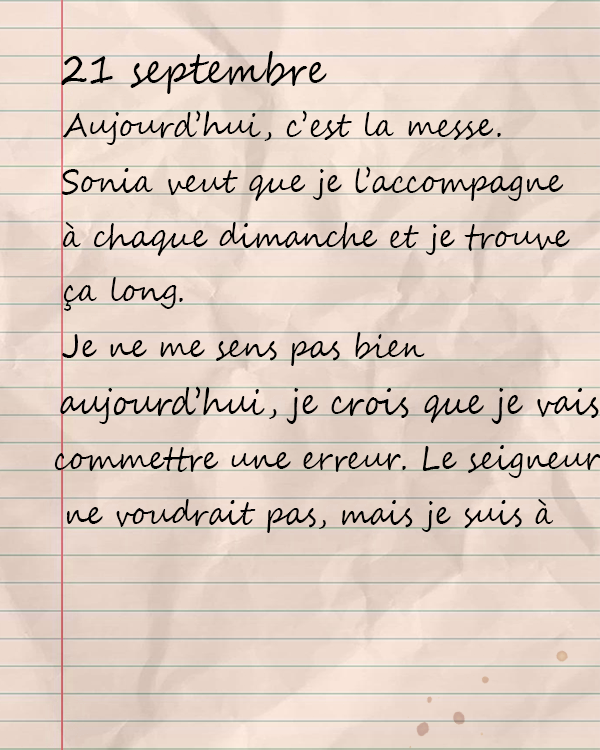
<style>
.page{position:relative;width:600px;height:750px}
.page>*{position:absolute;margin:0}
.t1{font:41.8px "SegoeScript";color:#000000;scale:0.9 1}
.t2{font:33.3px "SegoeScript";color:#000000;scale:0.9 1}
</style>
<div class="page">
<p class="t1" style="left:61px;top:51px;width:266px;height:43px">21 septembre</p>
<p class="t2" style="left:62px;top:110px;width:439px;height:35px">Aujourd’hui, c’est la messe.</p>
<p class="t2" style="left:62px;top:166px;width:502px;height:35px">Sonia veut que je l’accompagne</p>
<p class="t2" style="left:63px;top:222px;width:507px;height:34px">à chaque dimanche et je trouve</p>
<p class="t2" style="left:63px;top:277px;width:120px;height:34px">ça long.</p>
<p class="t2" style="left:62px;top:332px;width:363px;height:34px">Je ne me sens pas bien</p>
<p class="t2" style="left:60px;top:386px;width:539px;height:38px">aujourd’hui, je crois que je vais</p>
<p class="t2" style="left:54px;top:445px;width:547px;height:33px">commettre une erreur. Le seigneur</p>
<p class="t2" style="left:67px;top:499px;width:487px;height:34px">ne voudrait pas, mais je suis à bout.</p>
</div>
